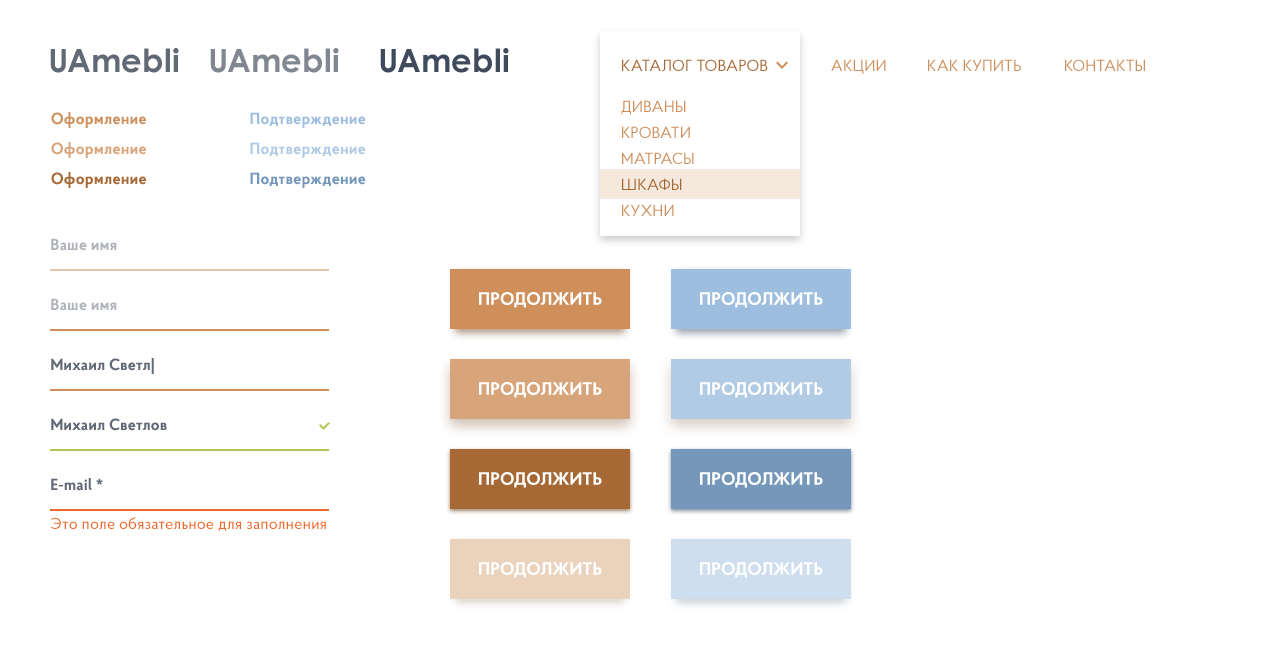
<style>
.page{position:relative;width:1280px;height:650px;background:#ffffff}
.page>*{position:absolute;margin:0}
.t1{font:32px "CenturyGothic-Bold";letter-spacing:0.01em;color:#616976}
.t2{font:32px "CenturyGothic-Bold";letter-spacing:0.01em;color:#818791}
.t3{font:32px "CenturyGothic-Bold";letter-spacing:0.01em;color:#3f4a5c}
.t4{font:16px "ProbaPro-Regular";letter-spacing:0.01em;color:#a66935;text-transform:uppercase}
.t5{font:16px "ProbaPro-Regular";letter-spacing:0.01em;color:#ce8f5a;text-transform:uppercase}
.t6{font:16px "ProbaPro-Bold";letter-spacing:0.02em;color:#ce8f5a}
.t7{font:16px "ProbaPro-Bold";letter-spacing:0.02em;color:#9dbedf}
.t8{font:16px "ProbaPro-Bold";letter-spacing:0.02em;color:#d8a57b}
.t9{font:16px "ProbaPro-Bold";letter-spacing:0.02em;color:#a66935}
.t10{font:16px "ProbaPro-Bold";letter-spacing:0.02em;color:#7598ba}
.t11{font:16px "ProbaPro-Bold";letter-spacing:0.01em;color:#b0b4ba}
.t12{font:18px "ProbaPro-Bold";letter-spacing:0.01em;color:#ffffff;text-transform:uppercase}
.t13{font:16px "ProbaPro-Bold";letter-spacing:0.01em;color:#616976}
.t14{font:16px "ProbaPro-Regular";letter-spacing:0.01em;color:#ee682b}
</style>
<div class="page">
<p class="t1" style="left:50px;top:48px;width:129px;height:25px">UAmebli</p>
<p class="t2" style="left:210px;top:48px;width:129px;height:25px">UAmebli</p>
<p class="t3" style="left:380px;top:48px;width:129px;height:25px">UAmebli</p>
<p class="t4" style="left:622px;top:59px;width:146px;height:12px">Каталог товаров</p>
<p class="t5" style="left:831px;top:59px;width:55px;height:15px">Акции</p>
<p class="t5" style="left:928px;top:59px;width:93px;height:12px">Как купить</p>
<p class="t5" style="left:1065px;top:59px;width:80px;height:12px">Контакты</p>
<p class="t5" style="left:621px;top:100px;width:65px;height:15px">Диваны</p>
<p class="t6" style="left:51px;top:112px;width:95px;height:16px">Оформление</p>
<p class="t7" style="left:250px;top:112px;width:116px;height:16px">Подтверждение</p>
<p class="t5" style="left:622px;top:126px;width:68px;height:12px">Кровати</p>
<p class="t8" style="left:51px;top:142px;width:95px;height:16px">Оформление</p>
<p class="t7" style="left:250px;top:142px;width:116px;height:16px;opacity:0.8">Подтверждение</p>
<p class="t5" style="left:622px;top:152px;width:72px;height:12px">Матрасы</p>
<p class="t9" style="left:51px;top:172px;width:95px;height:16px">Оформление</p>
<p class="t10" style="left:250px;top:172px;width:116px;height:16px">Подтверждение</p>
<p class="t4" style="left:622px;top:178px;width:60px;height:12px">Шкафы</p>
<p class="t5" style="left:622px;top:204px;width:52px;height:12px">Кухни</p>
<p class="t11" style="left:51px;top:238px;width:66px;height:13px">Ваше имя</p>
<p class="t12" style="left:479px;top:292px;width:123px;height:16px">Продолжить</p>
<p class="t12" style="left:700px;top:292px;width:123px;height:16px">Продолжить</p>
<p class="t11" style="left:51px;top:298px;width:66px;height:13px">Ваше имя</p>
<p class="t13" style="left:51px;top:358px;width:103px;height:16px">Михаил Светл|</p>
<p class="t12" style="left:479px;top:382px;width:123px;height:16px">Продолжить</p>
<p class="t12" style="left:700px;top:382px;width:123px;height:16px">Продолжить</p>
<p class="t13" style="left:51px;top:418px;width:116px;height:13px">Михаил Светлов</p>
<p class="t12" style="left:479px;top:472px;width:123px;height:16px">Продолжить</p>
<p class="t12" style="left:700px;top:472px;width:123px;height:16px">Продолжить</p>
<p class="t13" style="left:51px;top:478px;width:52px;height:13px">E-mail *</p>
<p class="t14" style="left:51px;top:517px;width:275px;height:14px">Это поле обязательное для заполнения</p>
<p class="t12" style="left:479px;top:562px;width:123px;height:16px">Продолжить</p>
<p class="t12" style="left:700px;top:562px;width:123px;height:16px">Продолжить</p>
</div>
